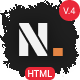
<style>
.page{position:relative;width:80px;height:80px}
.page>*{position:absolute;margin:0}
.t1{font:9.2px "Roboto-Regular";color:#fef2f3}
.t2{font:48px "SairaStencilOne-Regular";color:#f2f2f2}
.t3{font:48px "SairaStencilOne-Regular";color:#e38443}
.t4{font:9.2px "Roboto-Regular";color:#ffffff}
</style>
<div class="page">
<p class="t1" style="left:63px;top:7px;width:13px;height:8px">V.4</p>
<p class="t2" style="left:19px;top:23px;width:44px;height:33px">N<span class="t3">.</span></p>
<p class="t4" style="left:28px;top:70px;width:24px;height:7px">HTML</p>
</div>
